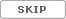
<style>
.page{position:relative;width:66px;height:19px;background:#ffffff}
.page>*{position:absolute;margin:0}
.t1{font:10px "Verdana";color:#656565;font-weight:bold}
</style>
<div class="page">
<p class="t1" style="left:18px;top:6px;width:28px;height:7px">SKIP</p>
</div>
